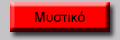
<style>
.page{position:relative;width:120px;height:40px;background:#ff0000}
.page>*{position:absolute;margin:0}
.t1{font:14px "ArialMT";color:#000000}
</style>
<div class="page">
<p class="t1" style="left:35px;top:11px;width:50px;height:11px">Μυστικό</p>
</div>
